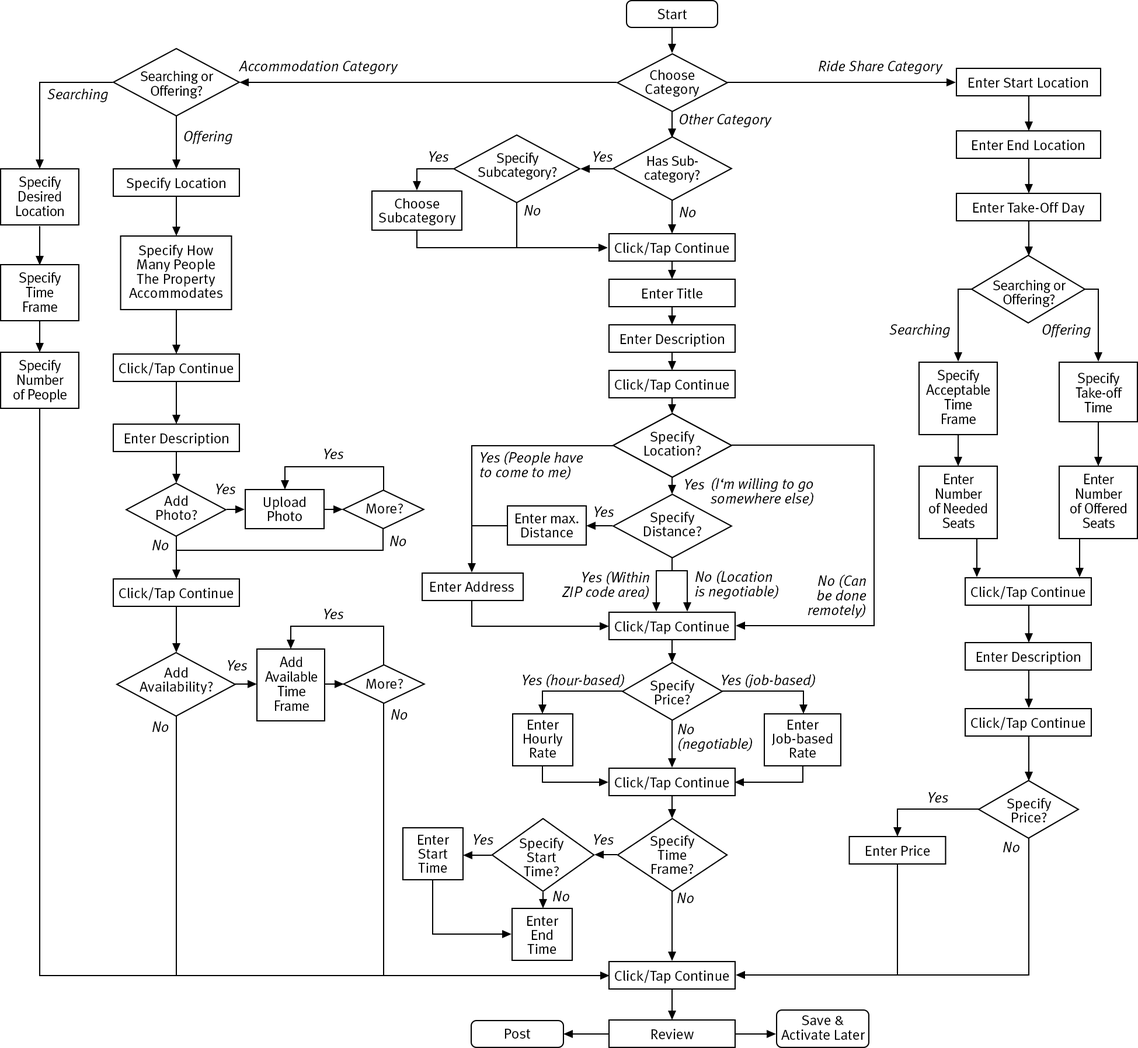
<style>
.page{position:relative;width:1138px;height:1048px;background:#ffffff}
.page>*{position:absolute;margin:0}
.t1{font:14.6px "MetaPlus-Roman";color:#000000}
.t2{font:14.6px "MetaPlus-Italic";color:#000000}
.t3{font:14.3px/14.3px "MetaPlus-Roman";letter-spacing:-0.025em;color:#000000}
.t4{font:14.3px/14.3px "MetaPlus-Roman";color:#000000}
.t5{font:14.3px "MetaPlus-Roman";color:#000000}
.t6{font:14.6px/14.6px "MetaPlus-Roman";letter-spacing:-0.025em;color:#000000}
.t7{font:14.3px/14.3px "MetaPlus-Roman"}
.t8{font:14.6px/14.6px "MetaPlus-Italic";color:#000000}
</style>
<div class="page">
<p class="t1" style="left:658px;top:9px;width:29px;height:10px">Start</p>
<p class="t2" style="left:238px;top:60px;width:160px;height:15px">Accommodation Category</p>
<p class="t2" style="left:819px;top:60px;width:124px;height:15px">Ride Share Category</p>
<p class="t3" style="left:141px;top:71px;width:73px;height:28px;text-align:center">Searching or<br>Offering?</p>
<p class="t4" style="left:645px;top:69px;width:55px;height:28px;text-align:center">Choose<br>Category</p>
<p class="t5" style="left:969px;top:77px;width:119px;height:11px">Enter Start Location</p>
<p class="t2" style="left:47px;top:88px;width:61px;height:14px">Searching</p>
<p class="t2" style="left:680px;top:113px;width:92px;height:15px">Other Category</p>
<p class="t2" style="left:184px;top:131px;width:48px;height:13px">Offering</p>
<p class="t5" style="left:972px;top:140px;width:112px;height:10px">Enter End Location</p>
<p class="t2" style="left:429px;top:151px;width:20px;height:11px">Yes</p>
<p class="t3" style="left:478px;top:152px;width:79px;height:28px;text-align:center">Specify<br>Subcategory?</p>
<p class="t2" style="left:593px;top:151px;width:20px;height:11px">Yes</p>
<p class="t3" style="left:645px;top:155px;width:55px;height:28px;text-align:center">Has Sub-<br>category?</p>
<p class="t6" style="left:16px;top:176px;width:48px;height:40px;text-align:center">Specify<br>Desired<br>Location</p>
<p class="t5" style="left:127px;top:178px;width:98px;height:13px">Specify Location</p>
<p class="t4" style="left:379px;top:198px;width:77px;height:27px;text-align:center">Choose<br>Subcategory</p>
<p class="t2" style="left:524px;top:205px;width:17px;height:10px">No</p>
<p class="t2" style="left:680px;top:207px;width:16px;height:10px">No</p>
<p class="t5" style="left:973px;top:202px;width:112px;height:13px">Enter Take-Off Day</p>
<p class="t4" style="left:129px;top:245px;width:94px;height:53px;text-align:center">Specify How <br>Many People <br>The Property <br>Accommodates</p>
<p class="t5" style="left:615px;top:242px;width:114px;height:14px">Click/Tap Continue</p>
<p class="t6" style="left:19px;top:272px;width:42px;height:40px;text-align:center">Specify<br>Time<br>Frame</p>
<p class="t3" style="left:993px;top:280px;width:73px;height:27px;text-align:center">Searching or<br>Offering?</p>
<p class="t5" style="left:642px;top:288px;width:61px;height:10px">Enter Title</p>
<p class="t2" style="left:889px;top:324px;width:61px;height:14px">Searching</p>
<p class="t2" style="left:1042px;top:324px;width:49px;height:14px">Offering</p>
<p class="t5" style="left:620px;top:333px;width:104px;height:14px">Enter Description</p>
<p class="t6" style="left:13px;top:360px;width:54px;height:42px;text-align:center">Specify<br>Number <br>of People</p>
<p class="t5" style="left:119px;top:362px;width:115px;height:14px">Click/Tap Continue</p>
<p class="t6" style="left:926px;top:370px;width:64px;height:54px;text-align:center">Specify <br>Acceptable<br>Time<br>Frame</p>
<p class="t6" style="left:1076px;top:373px;width:47px;height:39px;text-align:center">Specify<br>Take-off<br>Time</p>
<p class="t5" style="left:615px;top:378px;width:114px;height:14px">Click/Tap Continue</p>
<p class="t5" style="left:124px;top:433px;width:104px;height:13px">Enter Description</p>
<p class="t4" style="left:644px;top:431px;width:57px;height:25px;text-align:center">Specify<br>Location?</p>
<p class="t7" style="left:645px;top:431px;width:57px;height:25px;text-align:center">Specify<br>Location?</p>
<p class="t2" style="left:324px;top:448px;width:20px;height:11px">Yes</p>
<p class="t8" style="left:480px;top:451px;width:103px;height:28px">Yes (People have to come to me)</p>
<p class="t6" style="left:929px;top:474px;width:59px;height:54px;text-align:center">Enter Number <br>of Needed Seats</p>
<p class="t6" style="left:1070px;top:474px;width:57px;height:54px;text-align:center">Enter Number <br>of Offered<br>Seats</p>
<p class="t2" style="left:216px;top:484px;width:20px;height:10px">Yes</p>
<p class="t2" style="left:685px;top:479px;width:20px;height:10px">Yes</p>
<p class="t8" style="left:711px;top:477px;width:102px;height:29px">(I‘m willing to go <br>somewhere else)</p>
<p class="t4" style="left:157px;top:495px;width:40px;height:25px;text-align:center">Add<br>Photo?</p>
<p class="t4" style="left:263px;top:496px;width:43px;height:25px;text-align:center">Upload<br>Photo</p>
<p class="t5" style="left:366px;top:503px;width:37px;height:10px">More?</p>
<p class="t2" style="left:594px;top:506px;width:20px;height:11px">Yes</p>
<p class="t4" style="left:516px;top:513px;width:63px;height:24px;text-align:center">Enter max.<br>Distance</p>
<p class="t4" style="left:644px;top:512px;width:57px;height:24px;text-align:center">Specify<br>Distance?</p>
<p class="t2" style="left:152px;top:540px;width:17px;height:10px">No</p>
<p class="t2" style="left:390px;top:536px;width:16px;height:10px">No</p>
<p class="t8" style="left:695px;top:570px;width:83px;height:29px">No (Location <br>is negotiable)</p>
<p class="t5" style="left:430px;top:581px;width:84px;height:11px">Enter Address</p>
<p class="t8" style="left:562px;top:571px;width:87px;height:28px;text-align:right">Yes (Within<br>ZIP code area)</p>
<p class="t8" style="left:808px;top:574px;width:59px;height:44px;text-align:right">No (Can <br>be done <br>remotely)</p>
<p class="t5" style="left:119px;top:587px;width:115px;height:14px">Click/Tap Continue</p>
<p class="t5" style="left:971px;top:586px;width:115px;height:14px">Click/Tap Continue</p>
<p class="t2" style="left:324px;top:609px;width:20px;height:10px">Yes</p>
<p class="t5" style="left:615px;top:620px;width:114px;height:14px">Click/Tap Continue</p>
<p class="t5" style="left:976px;top:651px;width:104px;height:14px">Enter Description</p>
<p class="t2" style="left:228px;top:660px;width:20px;height:10px">Yes</p>
<p class="t6" style="left:265px;top:656px;width:53px;height:55px;text-align:center">Add<br>Available<br>Time<br>Frame</p>
<p class="t4" style="left:140px;top:667px;width:73px;height:27px;text-align:center">Add<br>Availability?</p>
<p class="t2" style="left:523px;top:673px;width:101px;height:14px">Yes (hour-based)</p>
<p class="t2" style="left:722px;top:673px;width:93px;height:15px">Yes (job-based)</p>
<p class="t5" style="left:366px;top:679px;width:37px;height:10px">More?</p>
<p class="t4" style="left:651px;top:680px;width:44px;height:24px;text-align:center">Specify<br>Price?</p>
<p class="t2" style="left:391px;top:709px;width:17px;height:10px">No</p>
<p class="t2" style="left:152px;top:721px;width:17px;height:11px">No</p>
<p class="t4" style="left:524px;top:719px;width:39px;height:38px;text-align:center">Enter<br>Hourly<br>Rate</p>
<p class="t8" style="left:678px;top:724px;width:75px;height:28px">No<br>(negotiable)</p>
<p class="t4" style="left:771px;top:719px;width:62px;height:38px;text-align:center">Enter<br>Job-based<br>Rate</p>
<p class="t5" style="left:971px;top:717px;width:115px;height:14px">Click/Tap Continue</p>
<p class="t5" style="left:615px;top:776px;width:114px;height:14px">Click/Tap Continue</p>
<p class="t2" style="left:929px;top:792px;width:19px;height:10px">Yes</p>
<p class="t4" style="left:1007px;top:798px;width:45px;height:24px;text-align:center">Specify<br>Price?</p>
<p class="t2" style="left:474px;top:834px;width:19px;height:10px">Yes</p>
<p class="t2" style="left:594px;top:834px;width:20px;height:10px">Yes</p>
<p class="t4" style="left:418px;top:835px;width:32px;height:37px;text-align:center">Enter<br>Start<br>Time</p>
<p class="t4" style="left:520px;top:837px;width:44px;height:39px;text-align:center">Specify<br>Start<br>Time?</p>
<p class="t4" style="left:651px;top:835px;width:44px;height:39px;text-align:center">Specify<br>Time <br>Frame?</p>
<p class="t5" style="left:866px;top:845px;width:64px;height:11px">Enter Price</p>
<p class="t2" style="left:1003px;top:842px;width:17px;height:10px">No</p>
<p class="t2" style="left:553px;top:891px;width:16px;height:10px">No</p>
<p class="t2" style="left:677px;top:892px;width:17px;height:11px">No</p>
<p class="t4" style="left:527px;top:916px;width:32px;height:38px;text-align:center">Enter<br>End<br>Time</p>
<p class="t5" style="left:615px;top:969px;width:114px;height:14px">Click/Tap Continue</p>
<p class="t4" style="left:781px;top:1015px;width:84px;height:24px;text-align:center">Save &amp; <br>Activate Later</p>
<p class="t5" style="left:505px;top:1028px;width:26px;height:10px">Post</p>
<p class="t5" style="left:651px;top:1028px;width:43px;height:11px">Review</p>
</div>
